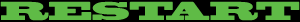
<style>
.page{position:relative;width:300px;height:22px;background:#5fbb46}
.page>*{position:absolute;margin:0}
.t1{font:24px "BlackoakStd";color:#5fbb46}
</style>
<div class="page">
<p class="t1" style="left:0px;top:1px;width:300px;height:20px">RESTART</p>
</div>
